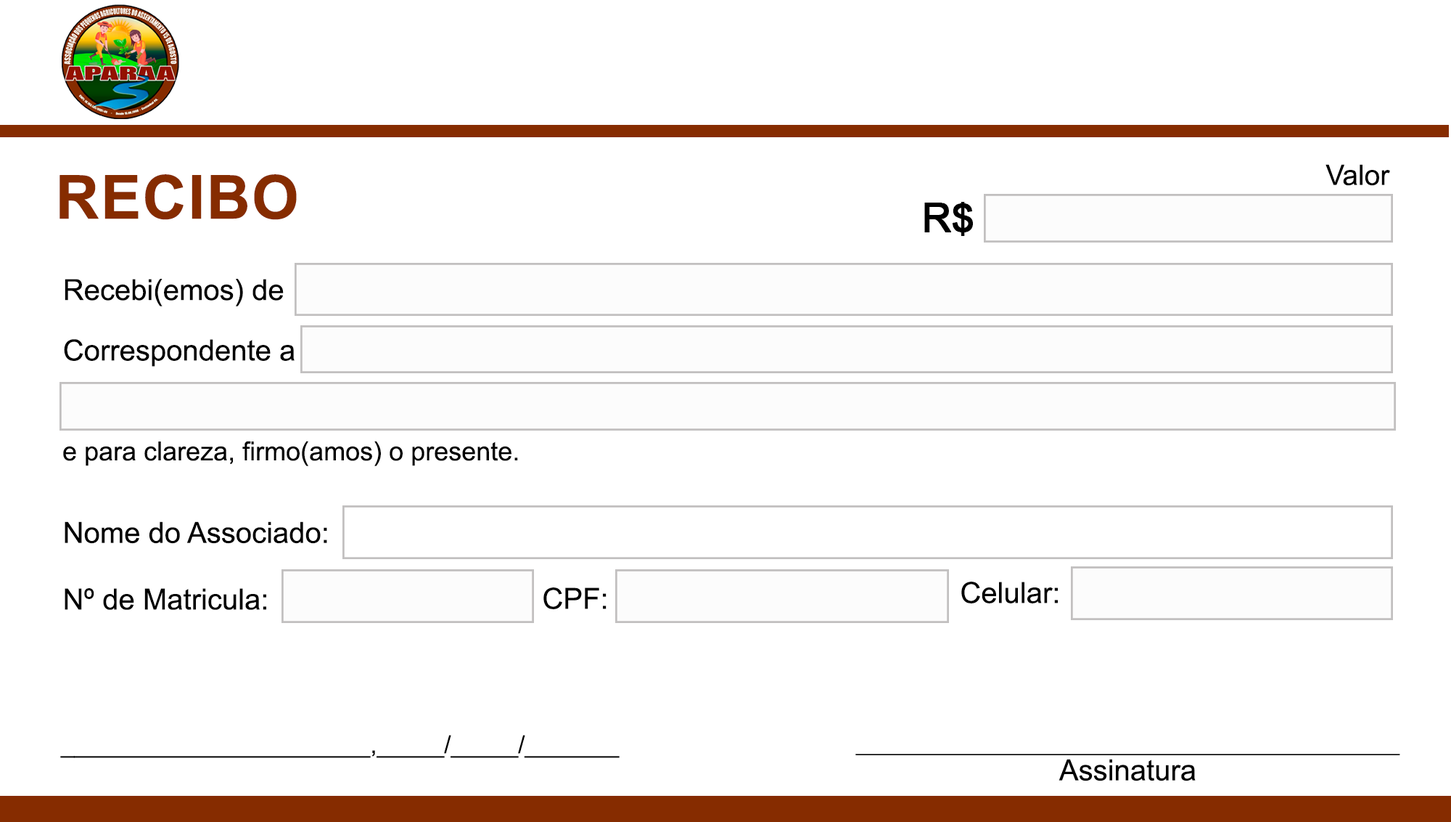
<style>
.page{position:relative;width:1451px;height:822px;background:#ffffff}
.page>*{position:absolute;margin:0}
.t1{font:28.2px "ArialMT";color:#000000}
.t2{font:60.4px "Arial-BoldMT";color:#862c00;font-weight:bold}
.t3{font:40.3px "ArialMT";color:#000000;font-weight:bold}
.t4{font:29px/60.4px "ArialMT";color:#000000}
.t5{font:26.1px "ArialMT";color:#000000}
.t6{font:29px "ArialMT";color:#000000}
.t7{font:24.2px "ArialMT";color:#000000}
.t8{font:24.2px/28.2px "MyriadPro-Regular";color:#000000}
.t9{font:29px/28.2px "ArialMT";color:#000000}
</style>
<div class="page">
<p class="t1" style="left:1326px;top:164px;width:65px;height:22px">Valor</p>
<p class="t2" style="left:60px;top:174px;width:237px;height:46px">RECIBO</p>
<p class="t3" style="left:925px;top:202px;width:48px;height:34px">R$</p>
<p class="t4" style="left:64px;top:279px;width:231px;height:87px">Recebi(emos) de<br>Correspondente a</p>
<p class="t5" style="left:63px;top:441px;width:455px;height:25px">e para clareza, firmo(amos) o presente.</p>
<p class="t6" style="left:65px;top:521px;width:262px;height:23px">Nome do Associado:</p>
<p class="t6" style="left:962px;top:581px;width:96px;height:22px">Celular:</p>
<p class="t6" style="left:65px;top:588px;width:201px;height:22px">Nº de Matricula:</p>
<p class="t6" style="left:544px;top:587px;width:63px;height:22px">CPF:</p>
<p class="t7" style="left:60px;top:734px;width:560px;height:24px">_______________________,_____/_____/_______</p>
<p class="t8" style="left:856px;top:753px;width:545px;height:28px;text-align:center">_____________________________________________<br><span class="t9">Assinatura</span></p>
</div>
